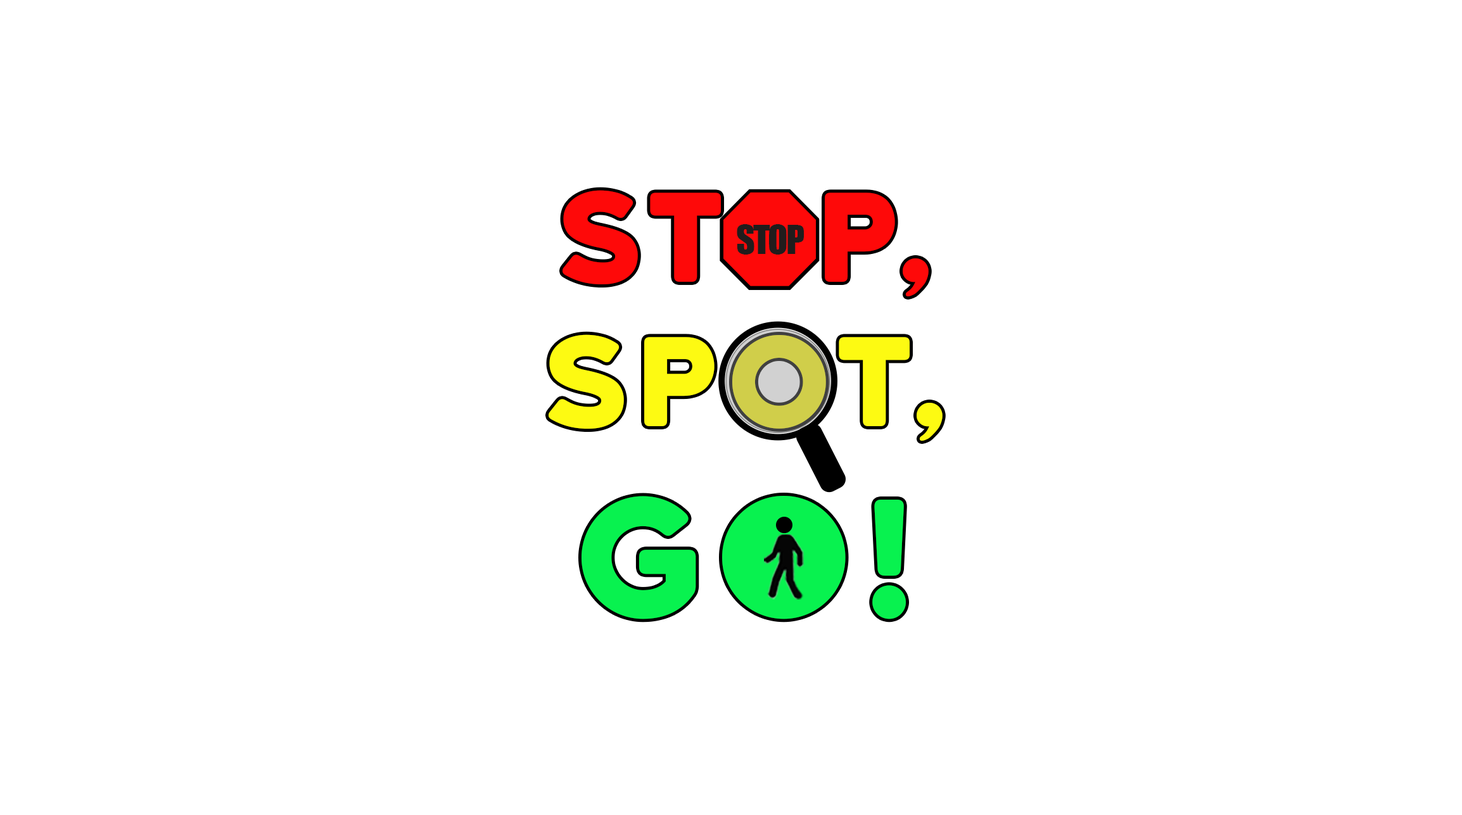
<style>
.page{position:relative;width:1462px;height:815px;background:#ffffff}
.page>*{position:absolute;margin:0}
.t1{font:120.4px "KatahdinRound-Regular";letter-spacing:0.05em;color:#fe0909}
.t2{font:120.4px "KatahdinRound-Regular";letter-spacing:0.05em;color:#fdfa12}
.t3{font:158.4px "KatahdinRound-Regular";letter-spacing:0.05em;color:#08f24f}
.t4{font:36.5px "Impact";letter-spacing:-0.055em;color:#211c1c}
</style>
<div class="page">
<p class="t1" style="left:549px;top:190px;width:394px;height:430px;text-align:center">St  p,<br><span class="t2">SPot,<br></span><span class="t3">Go!</span></p>
<p class="t4" style="left:737px;top:224px;width:68px;height:31px">STOP</p>
</div>
